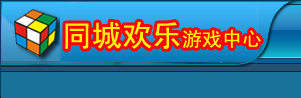
<style>
.page{position:relative;width:301px;height:98px;background:#197298}
.page>*{position:absolute;margin:0}
.t1{font:30px "SimHei";color:#faf20b}
.t2{font:20px "SimHei";color:#faf20b}
</style>
<div class="page">
<p class="t1" style="left:65px;top:21px;width:196px;height:28px">同城欢乐<span class="t2">游戏中心</span></p>
</div>
